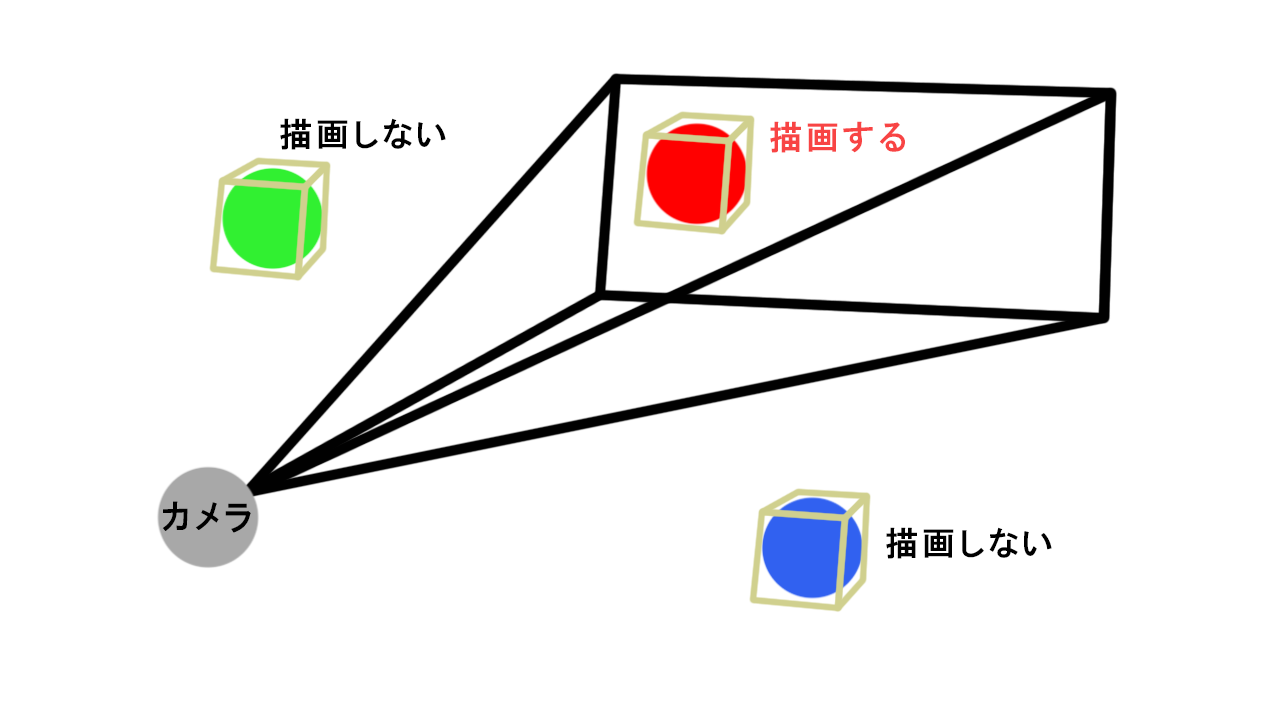
<style>
.page{position:relative;width:1280px;height:720px;background:#ffffff}
.page>*{position:absolute;margin:0}
.t1{font:33.3px "HGPGothicE";letter-spacing:0.1em;color:#000000}
.t2{font:33.3px "HGPGothicE";letter-spacing:0.1em;color:#f84444}
.t3{font:34.5px "HGPGothicE";letter-spacing:0.1em;color:#000000}
</style>
<div class="page">
<p class="t1" style="left:280px;top:118px;width:166px;height:32px">描画しない</p>
<p class="t2" style="left:770px;top:121px;width:135px;height:32px">描画する</p>
<p class="t3" style="left:162px;top:501px;width:89px;height:32px">カメラ</p>
<p class="t1" style="left:886px;top:527px;width:166px;height:32px">描画しない</p>
</div>
